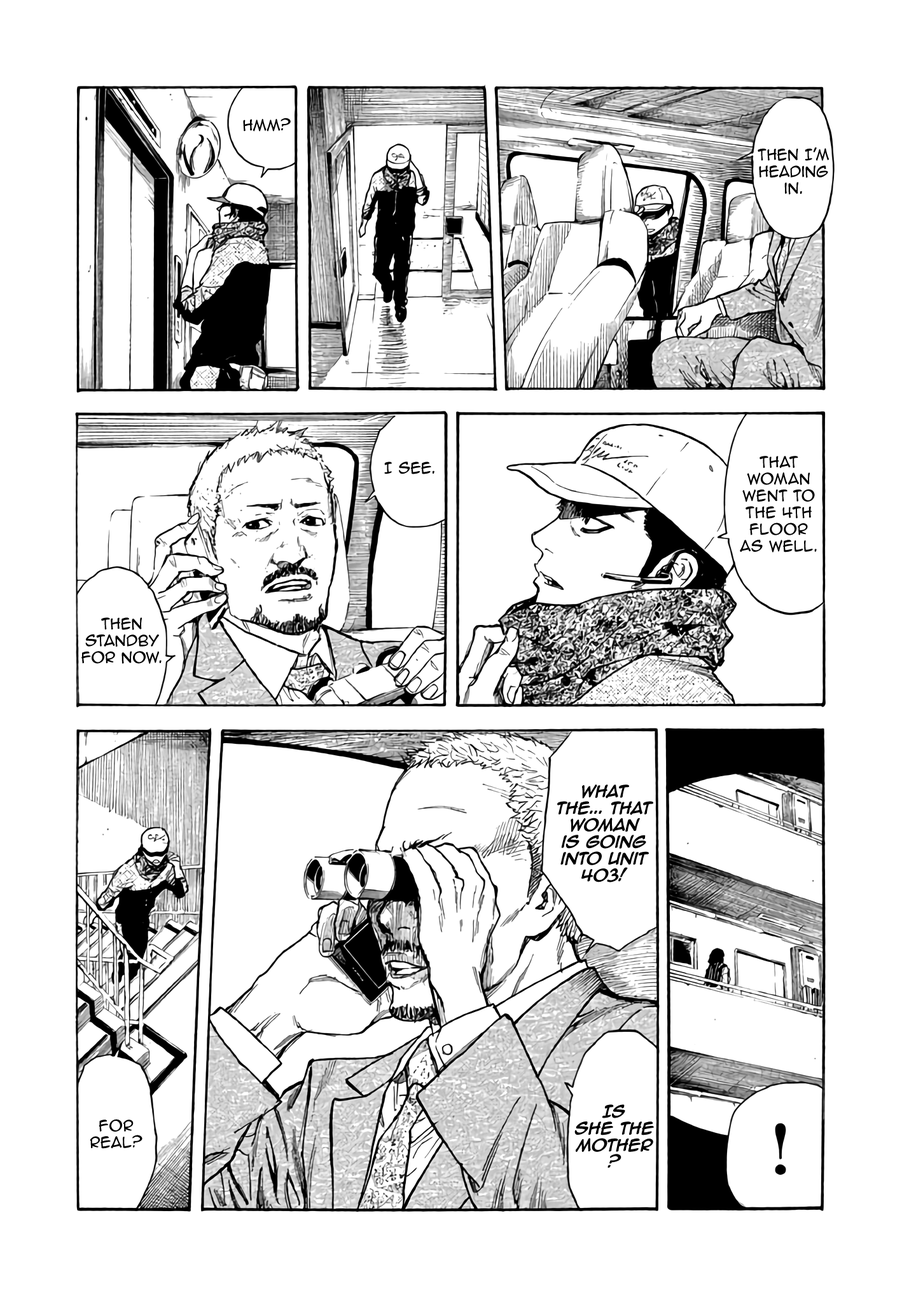
<style>
.page{position:relative;width:916px;height:1302px;background:#ffffff}
.page>*{position:absolute;margin:0}
.t1{font:14px "AnimeAce2.0BB";color:#000000}
.t2{font:14px "AnimeAce2.0BB-Bold";color:#000000}
</style>
<div class="page">
<p class="t1" style="left:243px;top:118px;width:48px;height:14px">Hmm?</p>
<p class="t1" style="left:757px;top:147px;width:72px;height:48px;text-align:center">Then I’m heading in.</p>
<p class="t1" style="left:384px;top:462px;width:50px;height:12px">I see.</p>
<p class="t1" style="left:740px;top:456px;width:76px;height:97px;text-align:center">That woman went to the 4th floor as well.</p>
<p class="t1" style="left:81px;top:617px;width:81px;height:47px;text-align:center">then standby for now.</p>
<p class="t2" style="left:557px;top:785px;width:96px;height:98px;text-align:center">What the... THat woman is going into Unit 403!</p>
<p class="t2" style="left:574px;top:1105px;width:80px;height:63px;text-align:center">Is <br>she the mother?</p>
<p class="t1" style="left:90px;top:1119px;width:52px;height:30px;text-align:center">for real?</p>
</div>
